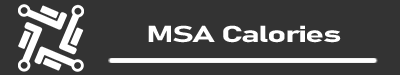
<style>
.page{position:relative;width:400px;height:75px;background:#333333}
.page>*{position:absolute;margin:0}
.t1{font:22.7px "Bahnschrift-Bold";letter-spacing:-0.05em;color:#ffffff;scale:1.58 1}
</style>
<div class="page">
<p class="t1" style="left:148px;top:25px;width:193px;height:18px">MSA Calories</p>
</div>
